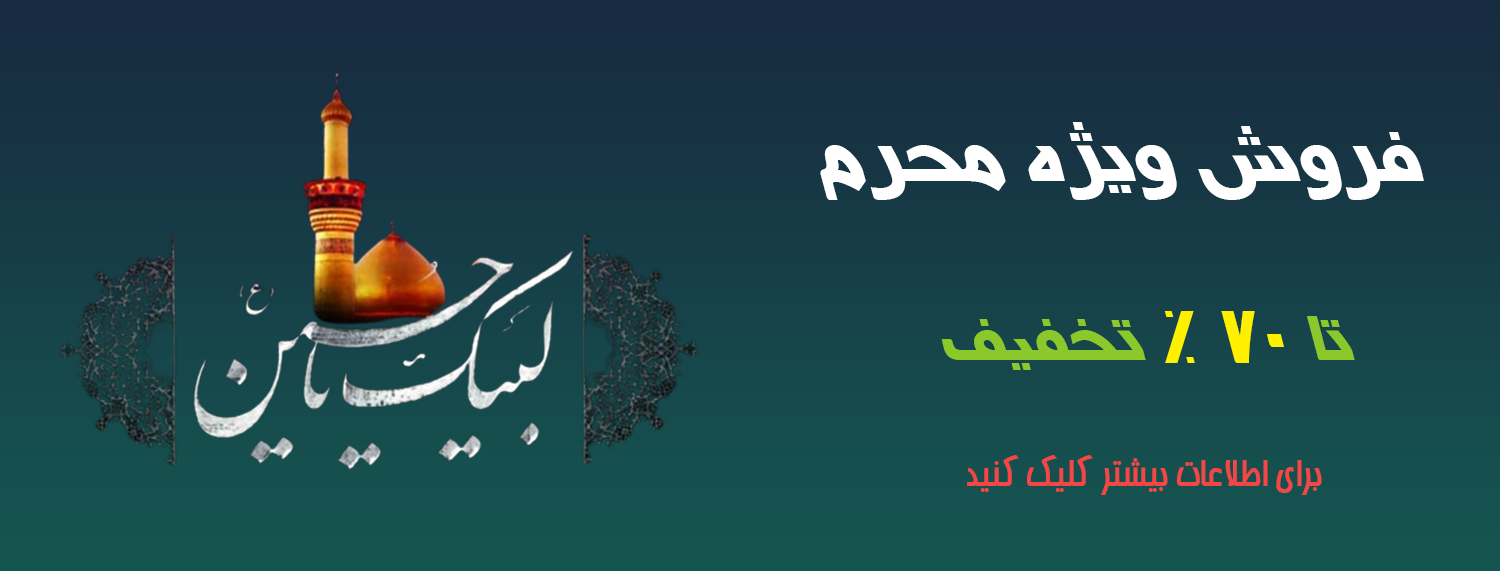
<style>
.page{position:relative;width:1500px;height:571px}
.page>*{position:absolute;margin:0}
.t1{font:72px "BNasimBold";color:#ffffff}
.t2{font:60px "BNasimBold";color:#8bc82b}
.t3{font:72px "BNasimBold";color:#fff000}
.t4{font:36px "BBardiyaBold";color:#f54646}
</style>
<div class="page">
<p class="t1" style="left:820px;top:122px;width:604px;height:78px">فروش ویژه محرم</p>
<p class="t2" style="left:941px;top:311px;width:414px;height:59px">تا <span class="t3">70 % </span>تخفیف</p>
<p class="t4" style="left:967px;top:455px;width:355px;height:40px">برای اطلاعات بیشتر کلیک کنید</p>
</div>
